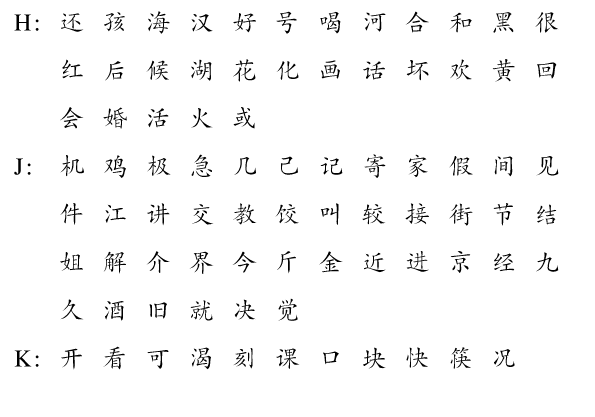
<style>
.page{position:relative;width:595px;height:417px;background:#ffffff}
.page>*{position:absolute;margin:0}
.t1{font:24px/48px "CTKaiTiSJ";letter-spacing:0.1em;color:#000000}
.t2{font:24px/48px "CTKaiTiSJ";letter-spacing:0.1em;color:#ffffff}
</style>
<div class="page">
<p class="t1" style="left:14px;top:11px;width:545px;height:359px">H:  还  孩  海  汉  好  号  喝  河  合  和  黑  很  <br><span class="t2">H:</span>  红  后  候  湖  花  化  画  话  坏  欢  黄  回  <br><span class="t2">H:</span>  会  婚  活  火  或  <br>J:   机  鸡  极  急  几  己  记  寄  家  假  间  见  <span class="t2">H:</span>  件  江  讲  交  教  饺  叫  较  接  街  节  结  <span class="t2">H:</span>  姐  解  介  界  今  斤  金  近  进  京  经  九  <span class="t2">H:</span>  久  酒  旧  就  决  觉  <br>K:  开  看  可  渴  刻  课  口  块  快  筷  况</p>
</div>
